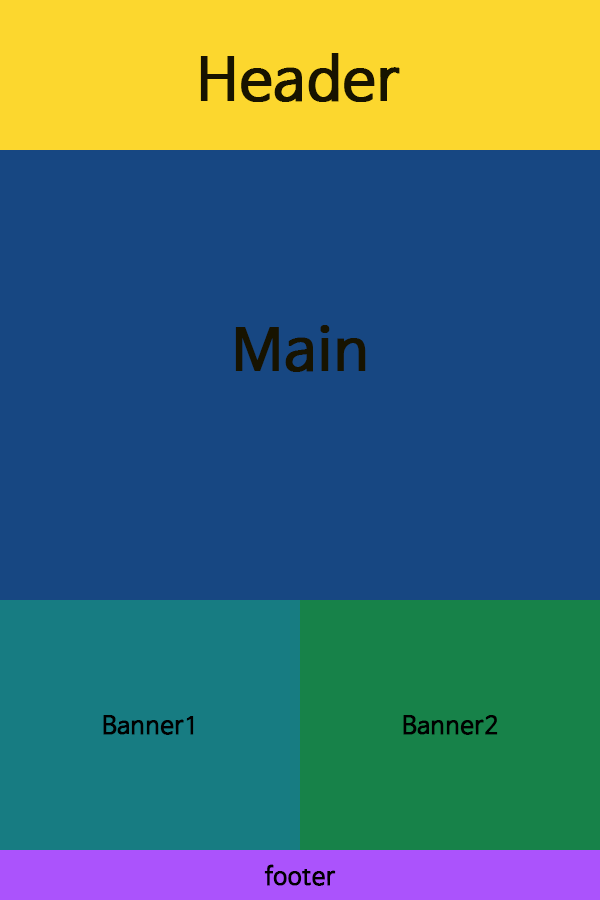
<style>
.page{position:relative;width:600px;height:900px;background:#174782}
.page>*{position:absolute;margin:0}
.t1{font:57.9px "NanumBarunGothic";color:#171300;font-weight:bold}
.t2{font:24px "NanumBarunGothic";color:#000000;font-weight:bold}
</style>
<div class="page">
<p class="t1" style="left:200px;top:53px;width:200px;height:49px">Header</p>
<p class="t1" style="left:235px;top:325px;width:131px;height:47px">Main</p>
<p class="t2" style="left:103px;top:715px;width:91px;height:20px">Banner1</p>
<p class="t2" style="left:403px;top:715px;width:95px;height:20px">Banner2</p>
<p class="t2" style="left:264px;top:864px;width:72px;height:22px">footer</p>
</div>
